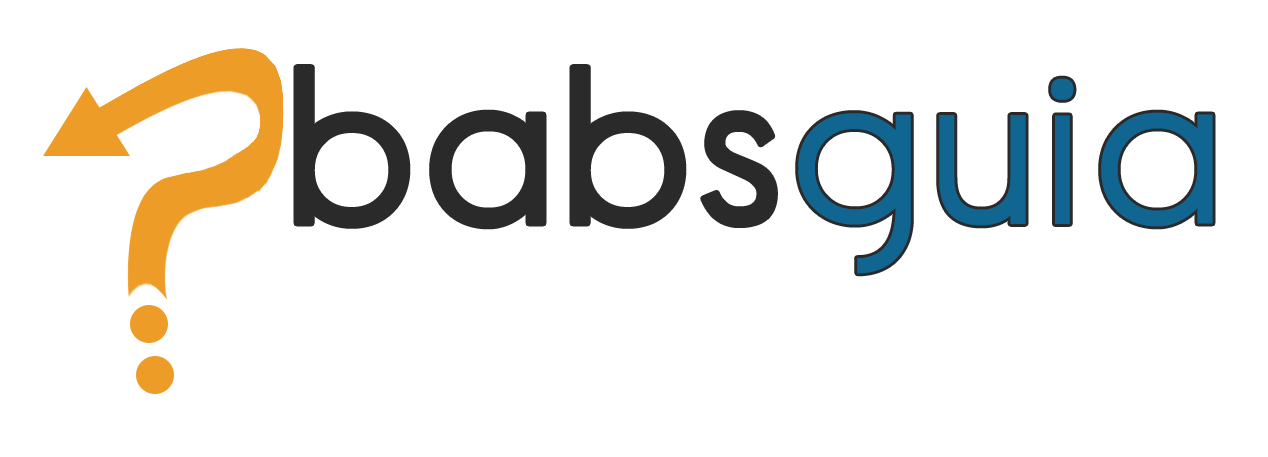
<style>
.page{position:relative;width:1268px;height:457px;background:#ffffff}
.page>*{position:absolute;margin:0}
.t1{font:272px "NormographeTryout";color:#2a2a2a}
.t2{font:272px "NormographeTryout";color:#106591}
</style>
<div class="page">
<p class="t1" style="left:296px;top:67px;width:917px;height:207px">babs<span class="t2">guia</span></p>
</div>
